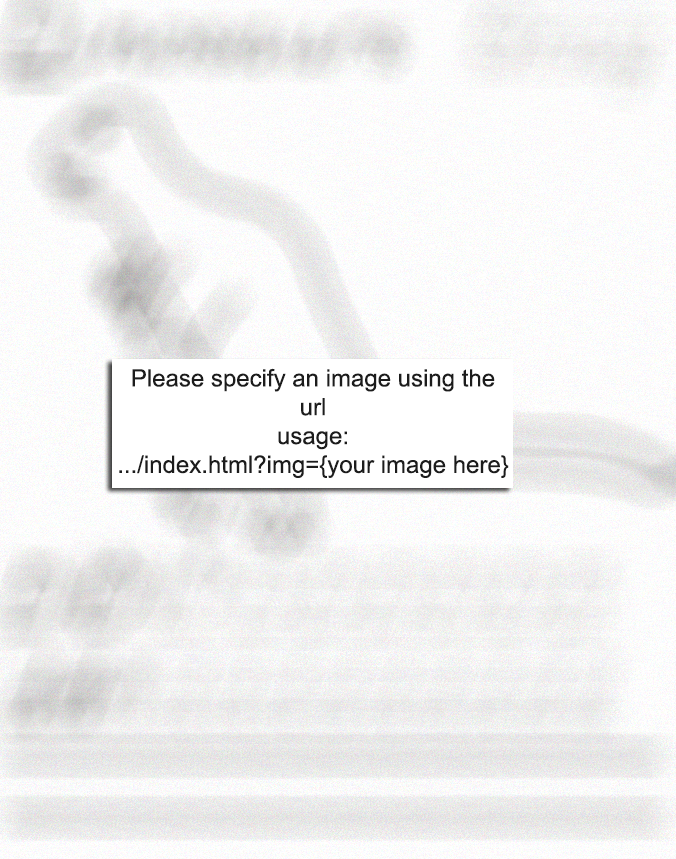
<style>
.page{position:relative;width:676px;height:859px}
.page>*{position:absolute;margin:0}
.t1{font:24px "ArialMT";color:#1c1c1c}
</style>
<div class="page">
<p class="t1" style="left:119px;top:368px;width:390px;height:110px;text-align:center">Please specify an image using the url<br>usage: <br>.../index.html?img={your image here}</p>
</div>
